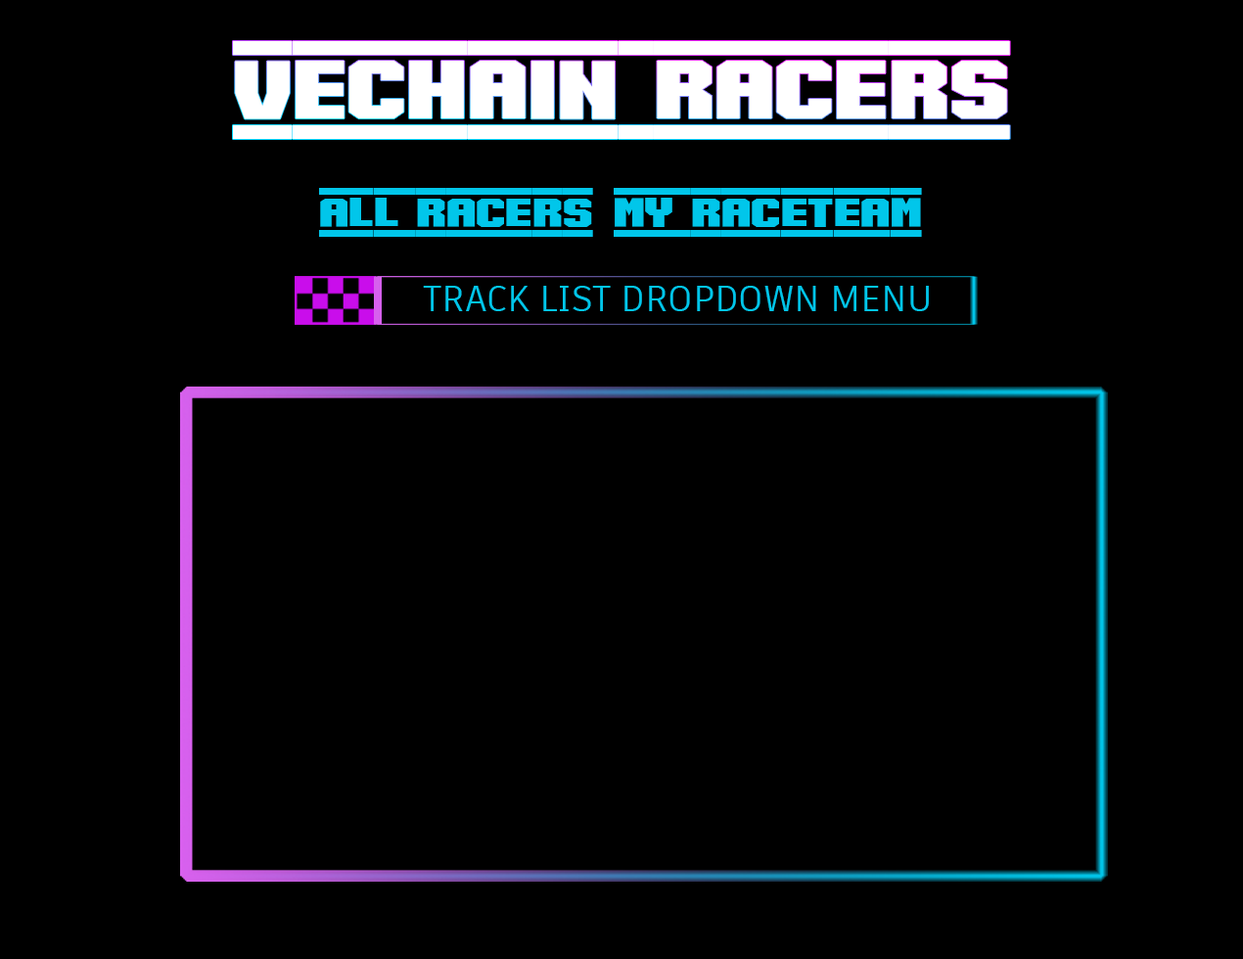
<style>
.page{position:relative;width:1243px;height:959px;background:#000000}
.page>*{position:absolute;margin:0}
.t1{font:141.9px "SpeedRacing-Regular";color:#ffffff}
.t2{font:70.5px "SpeedRacing-Regular";color:#01c6ea}
.t3{font:35.2px "ArtifaktElement-Regular";color:#01c6ea}
</style>
<div class="page">
<p class="t1" style="left:233px;top:41px;width:777px;height:98px">VeChain Racers</p>
<p class="t2" style="left:319px;top:188px;width:274px;height:49px">ALL RACERS</p>
<p class="t2" style="left:614px;top:188px;width:308px;height:49px">MY RACETEAM</p>
<p class="t3" style="left:423px;top:286px;width:506px;height:25px">TRACK LIST DROPDOWN MENU</p>
</div>
